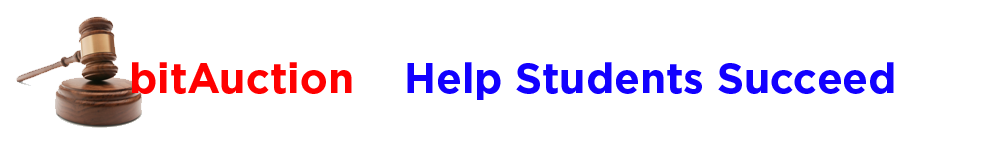
<style>
.page{position:relative;width:1000px;height:150px;background:#ffffff}
.page>*{position:absolute;margin:0}
.t1{font:42px "Gotham-Bold";color:#ff0000}
.t2{font:42px "Gotham-Bold";color:#1200ff}
</style>
<div class="page">
<p class="t1" style="left:132px;top:62px;width:54px;height:32px">bit</p>
<p class="t1" style="left:188px;top:62px;width:164px;height:32px">Auction</p>
<p class="t2" style="left:407px;top:62px;width:487px;height:38px">Help Students Succeed</p>
</div>
